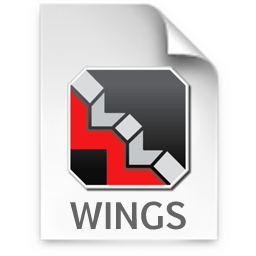
<style>
.page{position:relative;width:256px;height:256px;background:#ffffff}
.page>*{position:absolute;margin:0}
.t1{font:35px "EuphemiaUCAS-Bold";color:#656565}
</style>
<div class="page">
<p class="t1" style="left:70px;top:201px;width:116px;height:29px">WINGS</p>
</div>
